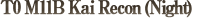
<style>
.page{position:relative;width:219px;height:18px;background:#ffffff}
.page>*{position:absolute;margin:0}
.t1{font:18px "RyuminPro-ExBold";letter-spacing:-0.08em;color:#4a3f32;font-weight:bold;scale:0.9 1}
</style>
<div class="page">
<p class="t1" style="left:0px;top:0px;width:192px;height:18px">T0 M11B Kai Recon (Night)</p>
</div>
